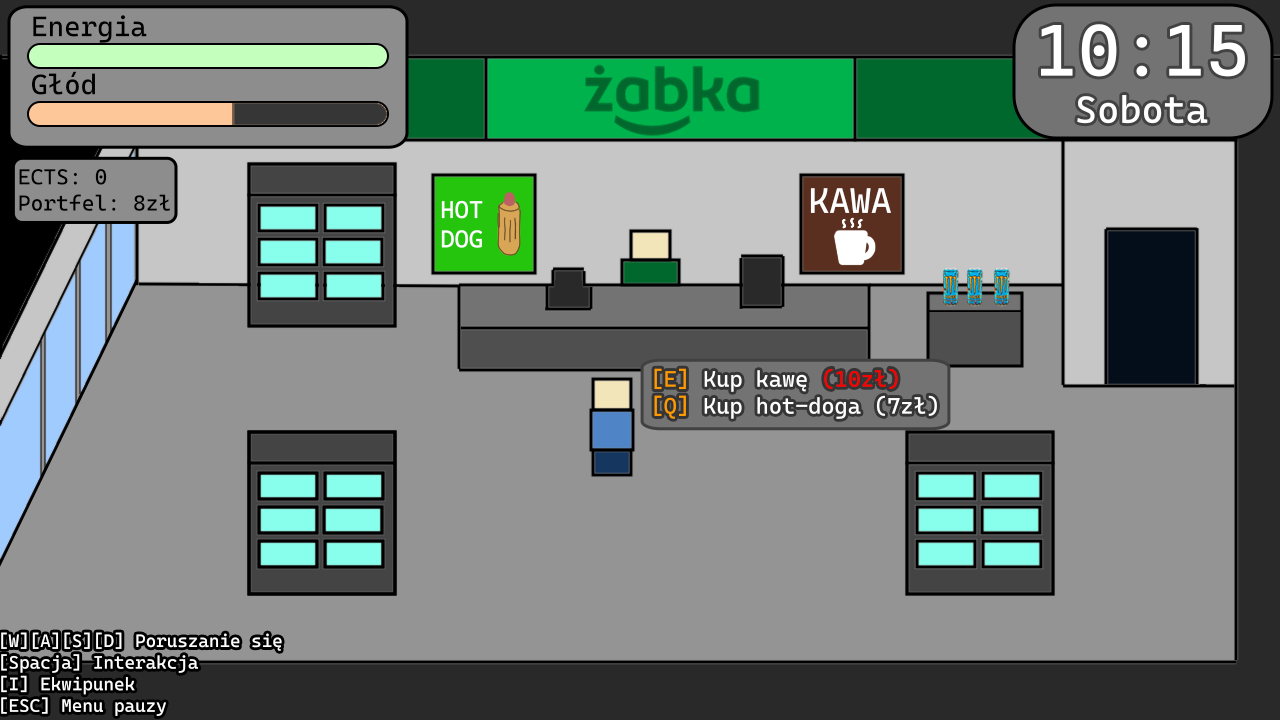
<style>
.page{position:relative;width:1280px;height:720px;background:#949494}
.page>*{position:absolute;margin:0}
.t1{font:28.2px "CaskaydiaCoveNFP-Regular";color:#000000}
.t2{font:73px "CaskaydiaCoveNFP-Regular";color:#ffffff}
.t3{font:37.8px "CaskaydiaCoveNFP-Regular";color:#ffffff}
.t4{font:21.8px "CaskaydiaCoveNFP-Regular";color:#000000}
.t5{font:22.4px "CaskaydiaCoveNFP-Regular";color:#ffffff}
.t6{font:22.4px "CaskaydiaCoveNFP-Regular";color:#ff9b00}
.t7{font:22.4px "CaskaydiaCoveNFP-Regular";color:#ff0000}
.t8{font:18px "CaskaydiaCoveNFP-Regular";color:#ffffff}
</style>
<div class="page">
<p class="t1" style="left:33px;top:15px;width:114px;height:28px">Energia</p>
<p class="t2" style="left:1040px;top:24px;width:206px;height:54px">10:15</p>
<p class="t1" style="left:31px;top:71px;width:64px;height:24px">Głód</p>
<p class="t3" style="left:1076px;top:95px;width:133px;height:30px">Sobota</p>
<p class="t4" style="left:19px;top:169px;width:151px;height:42px">ECTS: 0<br>Portfel: 8zł</p>
<p class="t5" style="left:653px;top:368px;width:285px;height:52px"><span class="t6">[E]</span> Kup kawę <span class="t7">(10zł)<br></span><span class="t6">[Q]</span> Kup hot-doga (7zł)</p>
<p class="t8" style="left:0px;top:632px;width:283px;height:86px">[W][A][S][D] Poruszanie się  <br>[Spacja] Interakcja  <br>[I] Ekwipunek  <br>[ESC] Menu pauzy</p>
</div>
